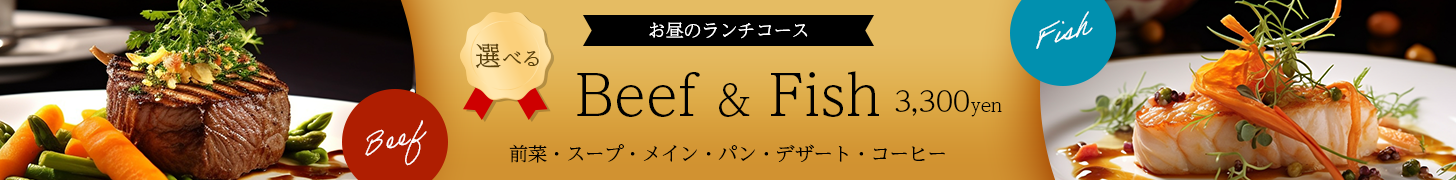
<style>
.page{position:relative;width:1456px;height:180px}
.page>*{position:absolute;margin:0}
.t1{font:30px "AdobeHandwriting-Ernie";color:#ffffff}
.t2{font:18px "UDReiminPr6N-Light";color:#ffffff}
.t3{font:19.7px "UDReiminPr6N-Light";color:#5b4108}
.t4{font:27.3px "UDReiminPr6N-Light";color:#5b4108}
.t5{font:56.2px "UDReiminPr6N-Light";color:#000000}
.t6{font:42.7px "UDReiminPr6N-Light";color:#000000}
.t7{font:28.3px "UDReiminPr6N-Light";color:#000000}
.t8{font:18px "UDReiminPr6N-Light";color:#000000}
.t9{font:19px "UDReiminPr6N-Light";color:#000000}
</style>
<div class="page">
<p class="t1" style="left:1036px;top:11px;width:57px;height:38px;rotate:-15deg">Fish</p>
<p class="t2" style="left:649px;top:22px;width:159px;height:17px">お昼のランチコース</p>
<p class="t3" style="left:475px;top:43px;width:64px;height:25px"><span class="t4">選</span>べる</p>
<p class="t5" style="left:577px;top:71px;width:302px;height:46px">Beef <span class="t6">&amp;</span> Fish</p>
<p class="t7" style="left:895px;top:90px;width:107px;height:27px">3,300<span class="t8">yen</span></p>
<p class="t1" style="left:365px;top:120px;width:62px;height:46px;rotate:-15deg">Beef</p>
<p class="t9" style="left:509px;top:144px;width:436px;height:19px">前菜・スープ・メイン・パン・デザート・コーヒー</p>
</div>
